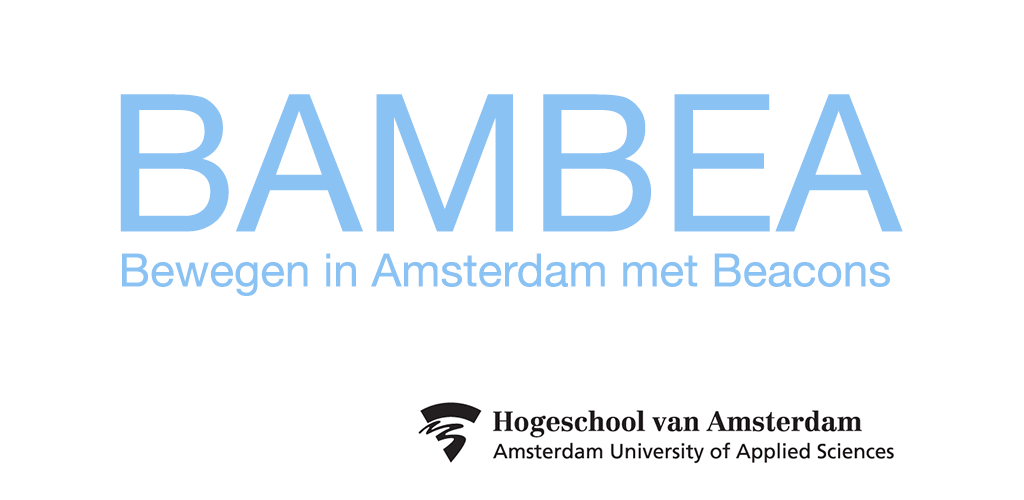
<style>
.page{position:relative;width:1024px;height:500px;background:#ffffff}
.page>*{position:absolute;margin:0}
.t1{font:45.8px "HelveticaNeue";color:#8ac2f4}
.t2{font:191.7px "HelveticaNeue";color:#8ac2f4}
</style>
<div class="page">
<p class="t1" style="left:120px;top:94px;width:783px;height:202px"><span class="t2">BAMBEA<br></span> Bewegen in Amsterdam met Beacons</p>
</div>
